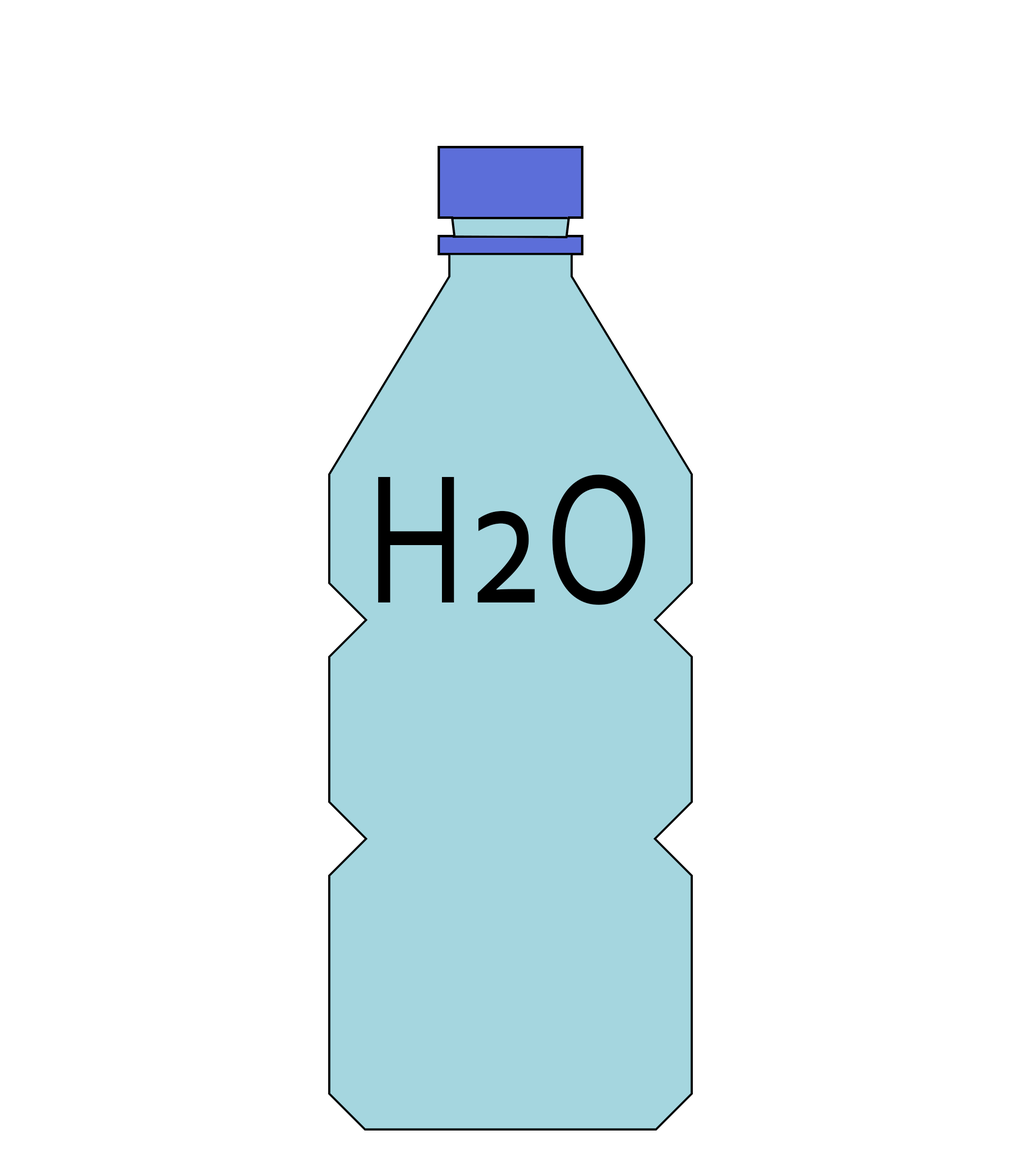
<style>
.page{position:relative;width:1021px;height:1167px;background:#ffffff}
.page>*{position:absolute;margin:0}
.t1{font:192px "Corbel";color:#000000;scale:0.79 1}
.t2{font:192px "OldEnglishTextMT";color:#f77e7e;scale:0.79 1}
</style>
<div class="page">
<p class="t1" style="left:378px;top:475px;width:267px;height:130px"><span class="t2"><br></span>H2O</p>
</div>
